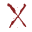
<style>
.page{position:relative;width:32px;height:32px;background:#ffffff}
.page>*{position:absolute;margin:0}
.t1{font:40px "Chiller-Regular";letter-spacing:-0.025em;color:#892122}
</style>
<div class="page">
<p class="t1" style="left:7px;top:3px;width:20px;height:25px">X</p>
</div>
